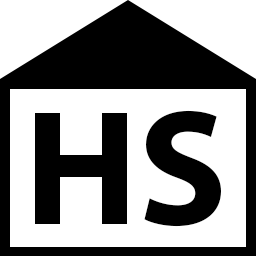
<style>
.page{position:relative;width:256px;height:256px;background:#ffffff}
.page>*{position:absolute;margin:0}
.t1{font:165px "MyriadPro-Bold";color:#000000}
</style>
<div class="page">
<p class="t1" style="left:35px;top:110px;width:186px;height:117px">HS</p>
</div>
